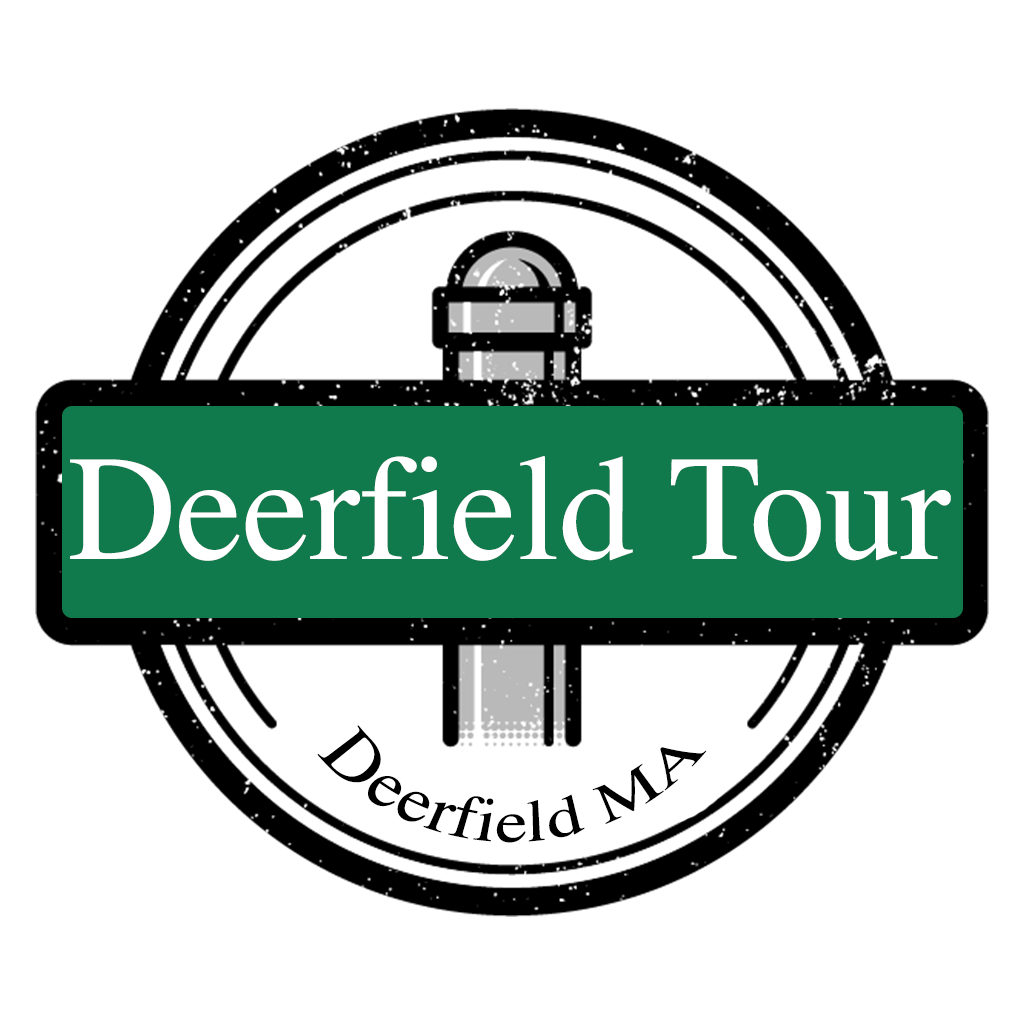
<style>
.page{position:relative;width:1024px;height:1024px;background:#ffffff}
.page>*{position:absolute;margin:0}
.t1{font:150px "Times-Roman";color:#ffffff}
.t2{font:55.9px/37.3px "Times-Roman";color:#000000}
</style>
<div class="page">
<p class="t1" style="left:70px;top:456px;width:881px;height:106px">Deerfield Tour</p>
<p class="t2" style="left:317px;top:725px;width:390px;height:118px;text-align:center">Deerfield MA</p>
</div>
